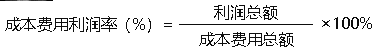
<style>
.page{position:relative;width:383px;height:53px;background:#ffffff}
.page>*{position:absolute;margin:0}
.t1{font:16px "MicrosoftYaHei";letter-spacing:-0.005em;color:#0d0d0d}
</style>
<div class="page">
<p class="t1" style="left:214px;top:5px;width:64px;height:15px">利润总额</p>
<p class="t1" style="left:5px;top:16px;width:167px;height:17px">成本费用利润率（%）=</p>
<p class="t1" style="left:322px;top:17px;width:50px;height:12px">×100%</p>
<p class="t1" style="left:199px;top:32px;width:95px;height:15px">成本费用总额</p>
</div>
